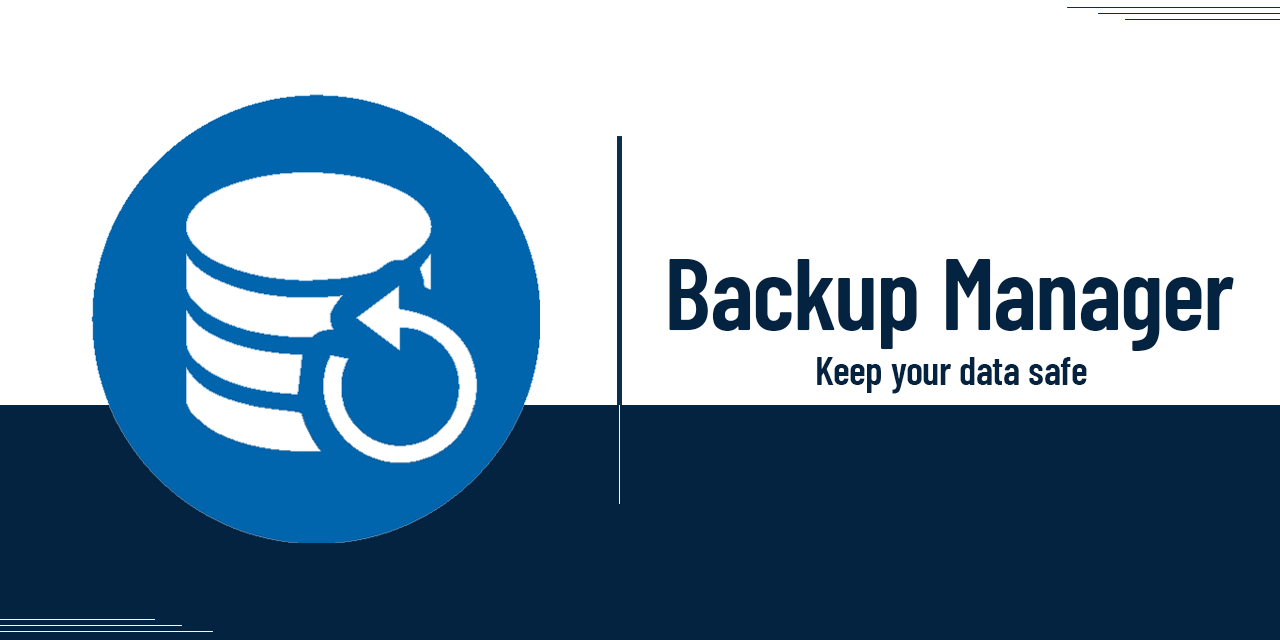
<style>
.page{position:relative;width:1280px;height:640px;background:#ffffff}
.page>*{position:absolute;margin:0}
.t1{font:102.5px "BarlowCondensed-SemiBold";color:#032341}
.t2{font:40.1px "BarlowCondensed-SemiBold";color:#032341}
</style>
<div class="page">
<p class="t1" style="left:669px;top:259px;width:565px;height:92px">Backup Manager</p>
<p class="t2" style="left:817px;top:357px;width:270px;height:37px">Keep your data safe</p>
</div>
